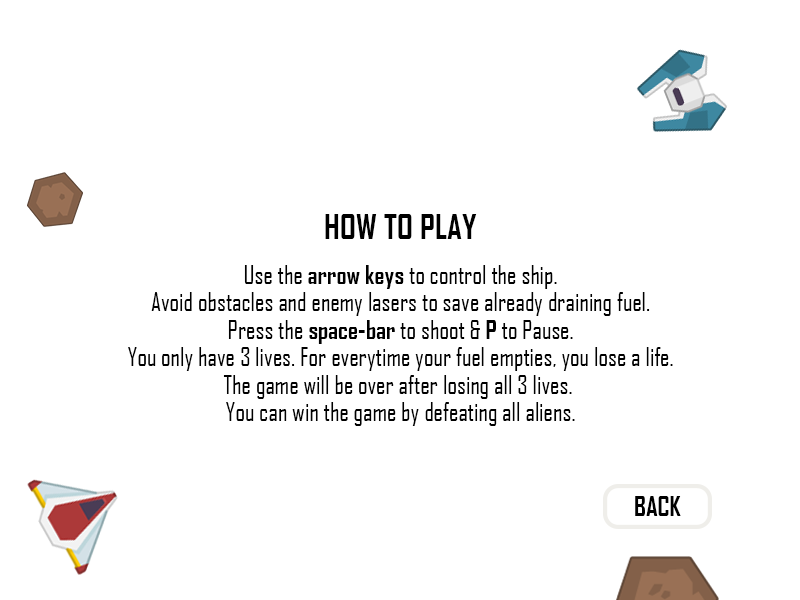
<style>
.page{position:relative;width:800px;height:600px;background:#ffffff}
.page>*{position:absolute;margin:0}
.t1{font:33.3px "AgencyFB-Bold";color:#000000}
.t2{font:25px/27.5px "AgencyFB-Reg";color:#000000}
.t3{font:25px/27.5px "AgencyFB-Bold";color:#000000}
.t4{font:25.7px "AgencyFB-Bold";color:#000000}
</style>
<div class="page">
<p class="t1" style="left:325px;top:214px;width:152px;height:25px">HOW TO PLAY</p>
<p class="t2" style="left:128px;top:265px;width:545px;height:161px;text-align:center">Use the <span class="t3">arrow keys</span> to control the ship.<br>Avoid obstacles and enemy lasers to save already draining fuel.<br>Press the <span class="t3">space-bar</span> to shoot &amp; <span class="t3">P</span> to Pause.<br>You only have 3 lives. For everytime your fuel empties, you lose a life.<br>The game will be over after losing all 3 lives. <br>You can win the game by defeating all aliens.</p>
<p class="t4" style="left:635px;top:496px;width:46px;height:20px">BACK</p>
</div>
